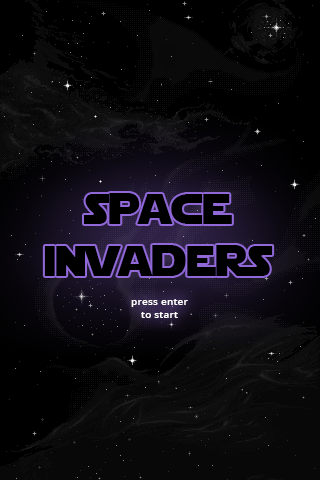
<style>
.page{position:relative;width:320px;height:480px;background:#000000}
.page>*{position:absolute;margin:0}
.t1{font:43px "StarJedi";color:#000000}
.t2{font:10.4px "OpenSans-Semibold";color:#ffffff}
</style>
<div class="page">
<p class="t1" style="left:44px;top:193px;width:229px;height:83px;text-align:center">space<br>invaders</p>
<p class="t2" style="left:131px;top:299px;width:57px;height:19px;text-align:center">press enter<br>to start</p>
</div>
